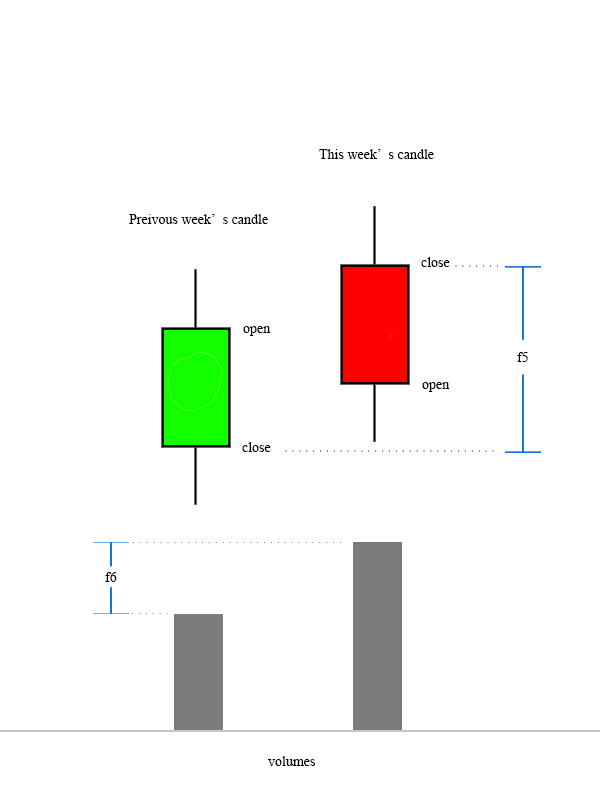
<style>
.page{position:relative;width:600px;height:800px;background:#ffffff}
.page>*{position:absolute;margin:0}
.t1{font:14px "TimesNewRomanPSMT";color:#000000}
</style>
<div class="page">
<p class="t1" style="left:319px;top:149px;width:115px;height:10px">This week’s candle</p>
<p class="t1" style="left:129px;top:214px;width:139px;height:10px">Preivous week’s candle</p>
<p class="t1" style="left:421px;top:257px;width:29px;height:10px">close</p>
<p class="t1" style="left:243px;top:326px;width:28px;height:10px">open</p>
<p class="t1" style="left:517px;top:352px;width:11px;height:10px">f5</p>
<p class="t1" style="left:422px;top:382px;width:28px;height:10px">open</p>
<p class="t1" style="left:242px;top:442px;width:29px;height:10px">close</p>
<p class="t1" style="left:105px;top:572px;width:12px;height:10px">f6</p>
<p class="t1" style="left:268px;top:756px;width:47px;height:10px">volumes</p>
</div>
